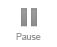
<style>
.page{position:relative;width:57px;height:47px;background:#ffffff}
.page>*{position:absolute;margin:0}
.t1{font:9px "ArialMT";letter-spacing:-0.02em;color:#999999}
</style>
<div class="page">
<p class="t1" style="left:16px;top:33px;width:25px;height:7px">Pause</p>
</div>
